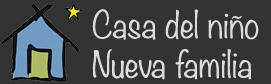
<style>
.page{position:relative;width:271px;height:84px;background:#333333}
.page>*{position:absolute;margin:0}
.t1{font:33px "Noteworthy-Light";color:#dcdcdc}
</style>
<div class="page">
<p class="t1" style="left:92px;top:9px;width:167px;height:71px">Casa del niño<br>Nueva familia</p>
</div>
